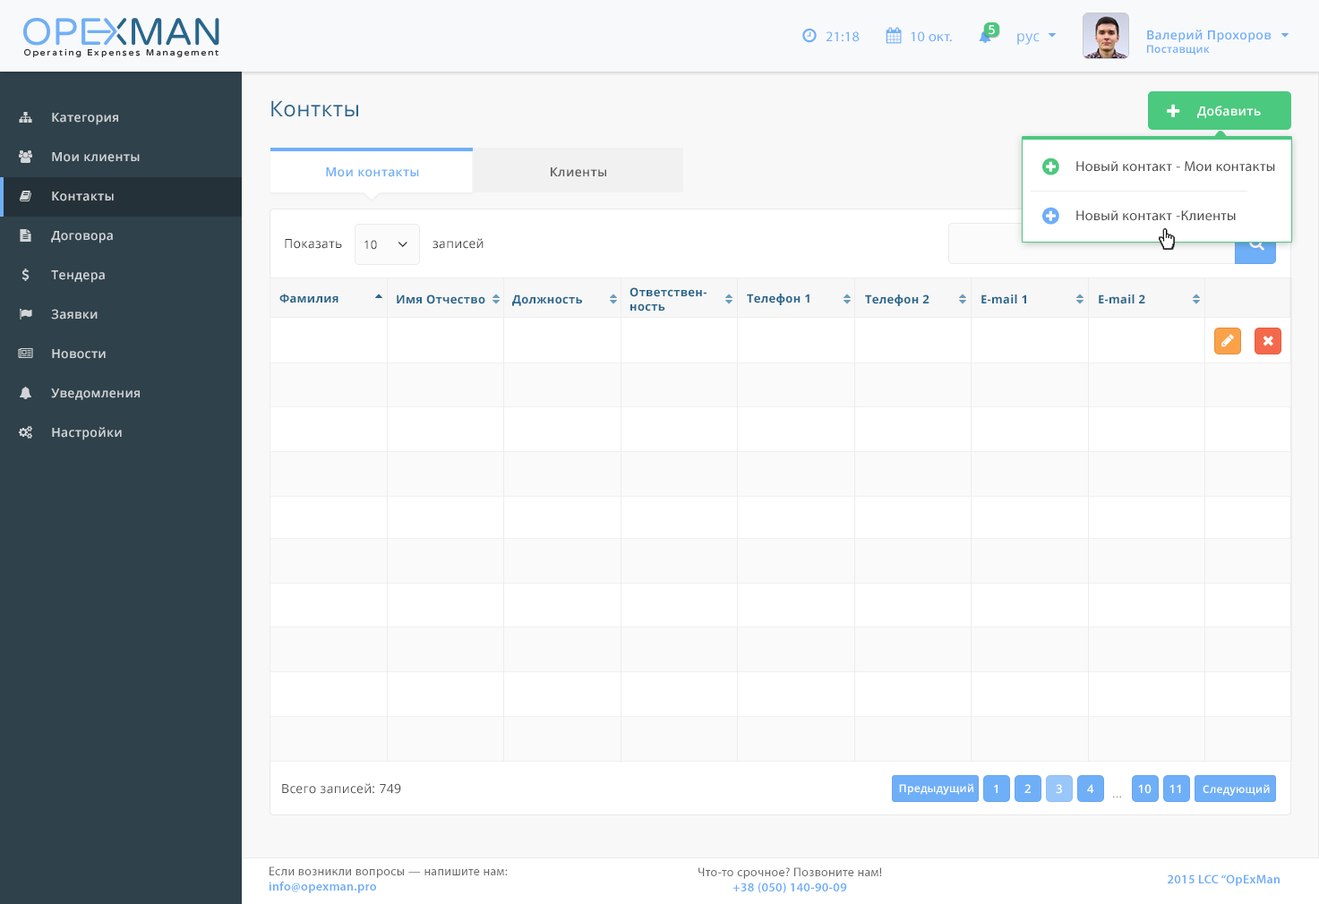
<style>
.page{position:relative;width:1319px;height:904px;background:#ffffff}
.page>*{position:absolute;margin:0}
.t1{font:12.5px "OpenSans-Semibold";letter-spacing:0.025em;color:#ffffff}
.t2{font:12.5px "OpenSans-Semibold";letter-spacing:0.025em;color:#6eaef7}
.t3{font:10.7px "OpenSans-Semibold";letter-spacing:0.025em;color:#6eaef7}
.t4{font:14.3px "MyriadPro-Regular";letter-spacing:0.025em;color:#6faff8}
.t5{font:14.3px "OpenSans";letter-spacing:0.025em;color:#6eaff8}
.t6{font:21.4px "OpenSans";letter-spacing:0.025em;color:#29658b}
.t7{font:12.5px "OpenSans-Semibold";letter-spacing:0.025em;color:#d2d5d7}
.t8{font:14.3px "MyriadPro-Regular";letter-spacing:0.025em;color:#4c4c4c}
.t9{font:12.5px "OpenSans-Semibold";letter-spacing:0.025em;color:#6eaff8}
.t10{font:12.5px "OpenSans-Semibold";letter-spacing:0.025em;color:#5a5a5a}
.t11{font:12.5px "OpenSans";letter-spacing:0.025em;color:#333333}
.t12{font:11.6px "OpenSans";letter-spacing:0.025em;color:#333333}
.t13{font:11.6px "OpenSans-Bold";letter-spacing:0.025em;color:#29668b}
.t14{font:12.5px "OpenSans";letter-spacing:0.025em;color:#4c4c4c}
.t15{font:10.7px "OpenSans-Semibold";letter-spacing:0.025em;color:#ffffff}
.t16{font:11.6px "OpenSans-Semibold";letter-spacing:0.025em;color:#ffffff}
.t17{font:11.6px "OpenSans";letter-spacing:0.025em;color:#999999}
.t18{font:12.5px "MyriadPro-Regular";letter-spacing:0.025em;color:#696969}
.t19{font:12.5px "MyriadPro-Semibold";letter-spacing:0.025em;color:#6eaef8}
</style>
<div class="page">
<p class="t1" style="left:988px;top:25px;width:7px;height:10px">5</p>
<p class="t2" style="left:1147px;top:30px;width:124px;height:26px">Валерий Прохоров<br><span class="t3">Поставщик</span></p>
<p class="t4" style="left:825px;top:31px;width:34px;height:11px">21:18</p>
<p class="t4" style="left:910px;top:31px;width:42px;height:11px">10 окт.</p>
<p class="t5" style="left:1017px;top:33px;width:22px;height:12px">рус</p>
<p class="t6" style="left:271px;top:100px;width:87px;height:17px">Конткты</p>
<p class="t7" style="left:52px;top:113px;width:66px;height:12px">Категория</p>
<p class="t1" style="left:1197px;top:106px;width:64px;height:12px">Добавить</p>
<p class="t7" style="left:52px;top:152px;width:88px;height:10px">Мои клиенты</p>
<p class="t8" style="left:1076px;top:161px;width:199px;height:11px">Новый контакт - Мои контакты</p>
<p class="t9" style="left:326px;top:167px;width:93px;height:10px">Мои контакты</p>
<p class="t10" style="left:551px;top:167px;width:55px;height:10px">Клиенты</p>
<p class="t7" style="left:52px;top:192px;width:62px;height:9px">Контакты</p>
<p class="t8" style="left:1076px;top:210px;width:159px;height:11px">Новый контакт -Клиенты</p>
<p class="t7" style="left:51px;top:231px;width:62px;height:13px">Договора</p>
<p class="t11" style="left:285px;top:239px;width:57px;height:10px">Показать</p>
<p class="t12" style="left:364px;top:240px;width:13px;height:10px">10</p>
<p class="t11" style="left:432px;top:238px;width:51px;height:11px">записей</p>
<p class="t7" style="left:51px;top:270px;width:54px;height:13px">Тендера</p>
<p class="t13" style="left:279px;top:294px;width:59px;height:9px">Фамилия</p>
<p class="t13" style="left:629px;top:287px;width:77px;height:25px">Ответствен-<br>ность</p>
<p class="t13" style="left:747px;top:294px;width:62px;height:11px">Телефон 1</p>
<p class="t13" style="left:397px;top:295px;width:88px;height:9px">Имя Отчество</p>
<p class="t13" style="left:512px;top:295px;width:70px;height:11px">Должность</p>
<p class="t13" style="left:865px;top:295px;width:64px;height:11px">Телефон 2</p>
<p class="t13" style="left:981px;top:295px;width:45px;height:9px">E-mail 1</p>
<p class="t13" style="left:1098px;top:295px;width:47px;height:9px">E-mail 2</p>
<p class="t7" style="left:51px;top:309px;width:47px;height:11px">Заявки</p>
<p class="t7" style="left:52px;top:349px;width:54px;height:10px">Новости</p>
<p class="t7" style="left:51px;top:389px;width:89px;height:11px">Уведомления</p>
<p class="t7" style="left:52px;top:427px;width:70px;height:13px">Настройки</p>
<p class="t14" style="left:282px;top:783px;width:119px;height:11px">Всего записей: 749</p>
<p class="t15" style="left:899px;top:783px;width:74px;height:12px">Предыдущий</p>
<p class="t16" style="left:994px;top:784px;width:3px;height:9px">1</p>
<p class="t16" style="left:1024px;top:784px;width:6px;height:9px">2</p>
<p class="t16" style="left:1056px;top:784px;width:6px;height:10px">3</p>
<p class="t16" style="left:1087px;top:784px;width:7px;height:9px">4</p>
<p class="t16" style="left:1138px;top:784px;width:13px;height:10px">10</p>
<p class="t16" style="left:1169px;top:784px;width:12px;height:9px">11</p>
<p class="t15" style="left:1202px;top:784px;width:67px;height:12px">Следующий</p>
<p class="t17" style="left:1113px;top:796px;width:8px;height:3px">...</p>
<p class="t18" style="left:269px;top:867px;width:239px;height:26px">Если возникли вопросы — напишите нам:<br><span class="t19">info@opexman.pro</span></p>
<p class="t18" style="left:698px;top:868px;width:184px;height:25px;text-align:center">Что-то срочное? Позвоните нам!<br><span class="t19">+38 (050) 140-90-09</span></p>
<p class="t19" style="left:1167px;top:875px;width:112px;height:11px">2015 LCC “OpExMan</p>
</div>
